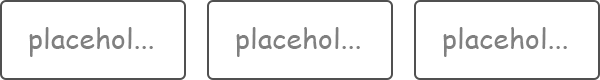
<style>
.page{position:relative;width:600px;height:80px;background:#ffffff}
.page>*{position:absolute;margin:0}
.t1{font:28px "ComicSansMS";color:#808080}
</style>
<div class="page">
<p class="t1" style="left:29px;top:27px;width:124px;height:30px">placehol...</p>
<p class="t1" style="left:236px;top:27px;width:124px;height:30px">placehol...</p>
<p class="t1" style="left:443px;top:27px;width:124px;height:30px">placehol...</p>
</div>
